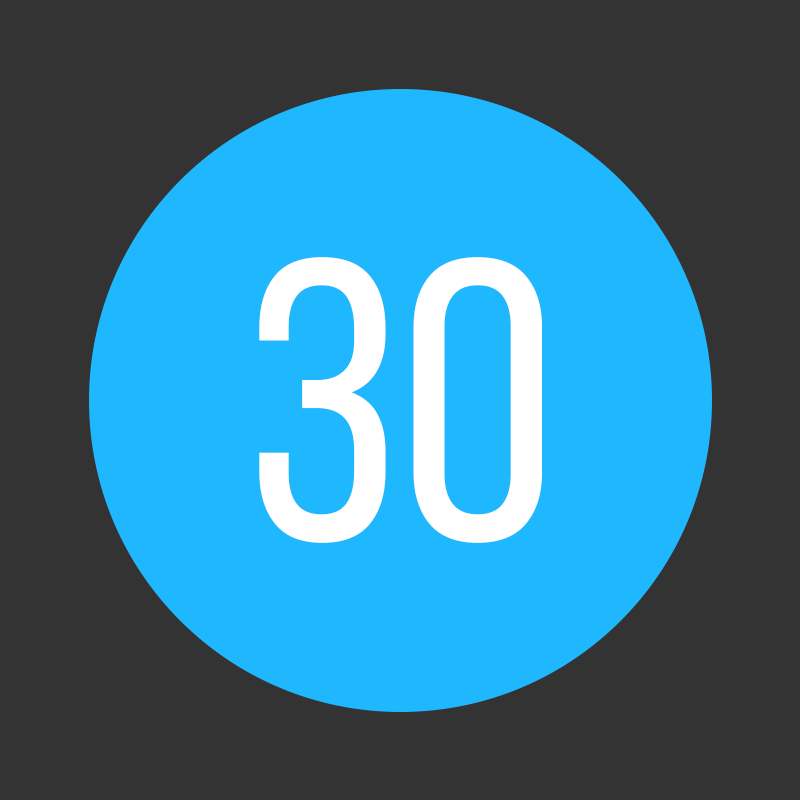
<style>
.page{position:relative;width:800px;height:800px;background:#333333}
.page>*{position:absolute;margin:0}
.t1{font:400px "BebasNeueRegular";color:#ffffff}
</style>
<div class="page">
<p class="t1" style="left:259px;top:257px;width:283px;height:286px">30</p>
</div>
